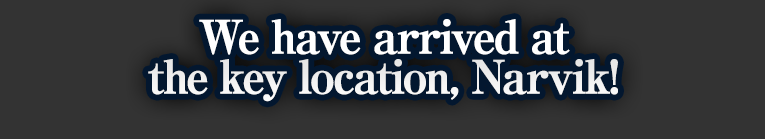
<style>
.page{position:relative;width:765px;height:139px;background:#333333}
.page>*{position:absolute;margin:0}
.t1{font:46px/40px "RyuminPro-ExBold";letter-spacing:-0.08em;color:#ffffff;font-weight:bold}
</style>
<div class="page">
<p class="t1" style="left:148px;top:19px;width:470px;height:83px;text-align:center">We have arrived at<br>the key location, Narvik!</p>
</div>
